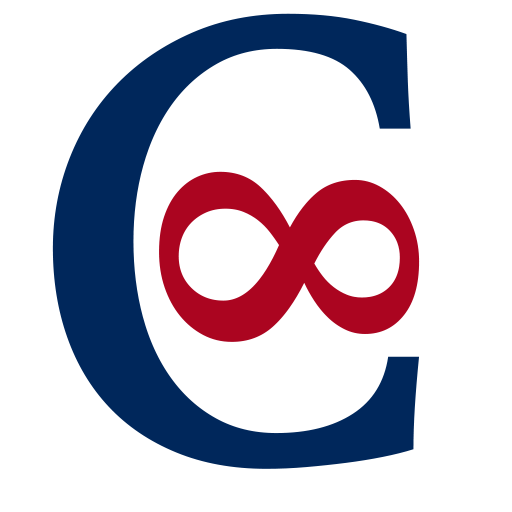
<style>
.page{position:relative;width:512px;height:512px;background:#ffffff}
.page>*{position:absolute;margin:0}
.t1{font:700px "MiloSerifComp-Medium";color:#00275b}
.t2{font:400px "MiloSerifComp-Medium";color:#ab0520}
</style>
<div class="page">
<p class="t1" style="left:52px;top:13px;width:367px;height:456px">C</p>
<p class="t2" style="left:159px;top:171px;width:261px;height:171px;rotate:90deg">8</p>
</div>
